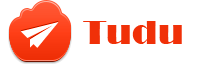
<style>
.page{position:relative;width:200px;height:64px;background:#ffffff}
.page>*{position:absolute;margin:0}
.t1{font:34px "Broadway";color:#f03008}
</style>
<div class="page">
<p class="t1" style="left:83px;top:21px;width:99px;height:23px">Tudu</p>
</div>
